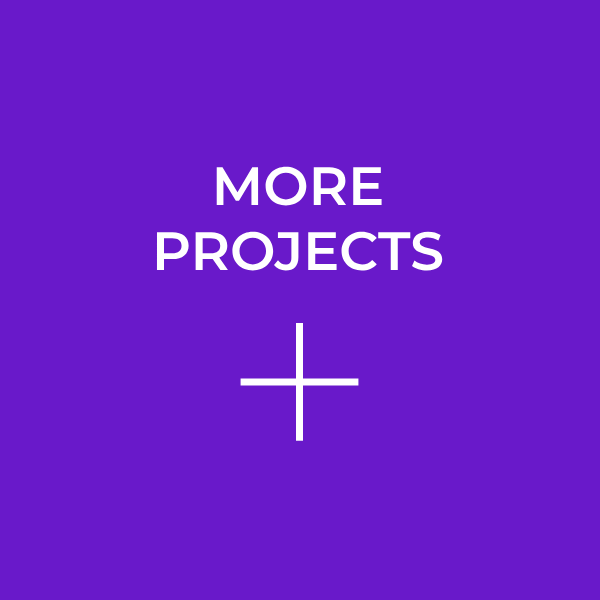
<style>
.page{position:relative;width:600px;height:600px;background:#6919ca}
.page>*{position:absolute;margin:0}
.t1{font:54px "Montserrat-SemiBold";color:#ffffff}
</style>
<div class="page">
<p class="t1" style="left:156px;top:166px;width:287px;height:105px;text-align:center">MORE<br>PROJECTS</p>
</div>
